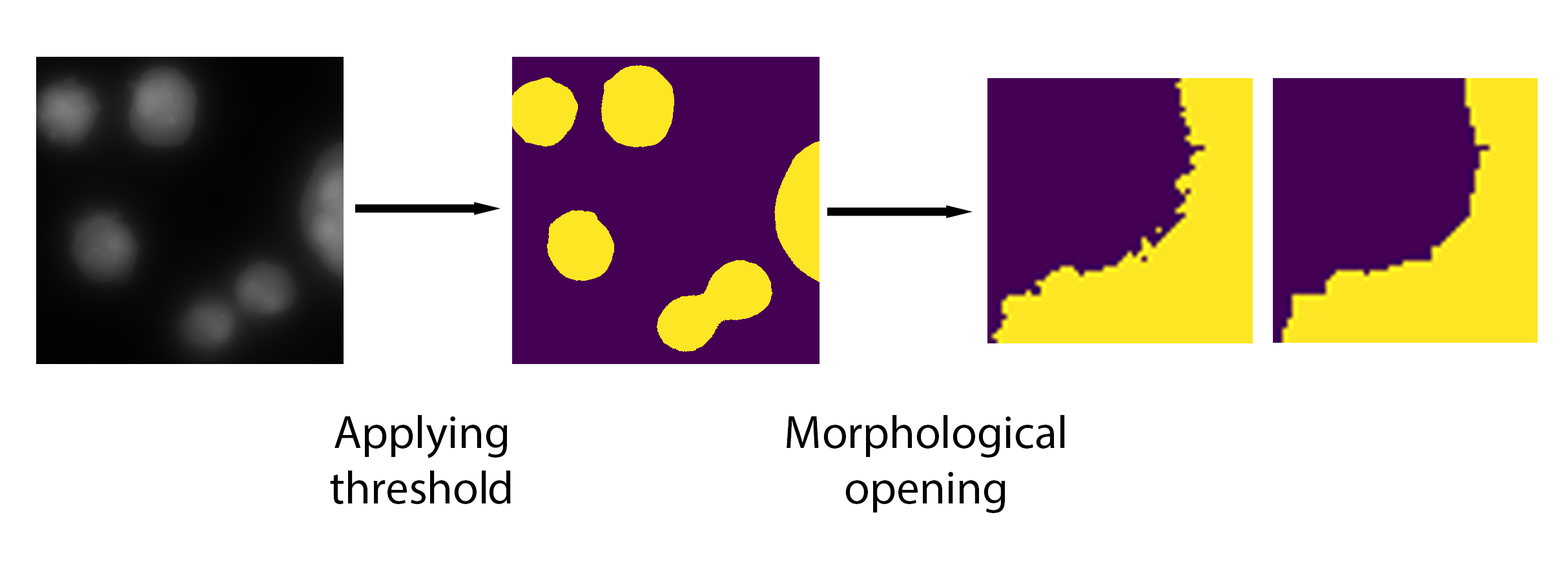
<style>
.page{position:relative;width:1568px;height:568px;background:#ffffff}
.page>*{position:absolute;margin:0}
.t1{font:46.5px "MyriadPro-Regular";color:#000000}
</style>
<div class="page">
<p class="t1" style="left:330px;top:415px;width:181px;height:89px;text-align:center">Applying <br>threshold</p>
<p class="t1" style="left:787px;top:415px;width:278px;height:98px;text-align:center">Morphological<br>opening</p>
</div>
